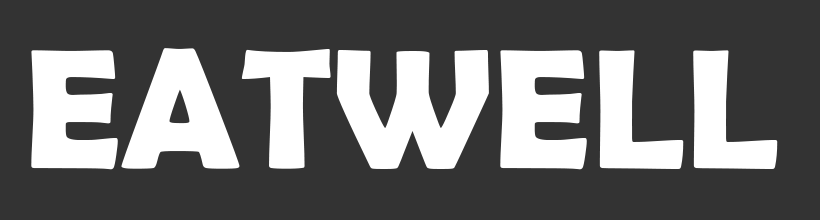
<style>
.page{position:relative;width:820px;height:220px;background:#333333}
.page>*{position:absolute;margin:0}
.t1{font:171.9px "BerlinSansFBDemi-Bold";color:#ffffff}
</style>
<div class="page">
<p class="t1" style="left:31px;top:48px;width:747px;height:122px">EATWELL</p>
</div>
